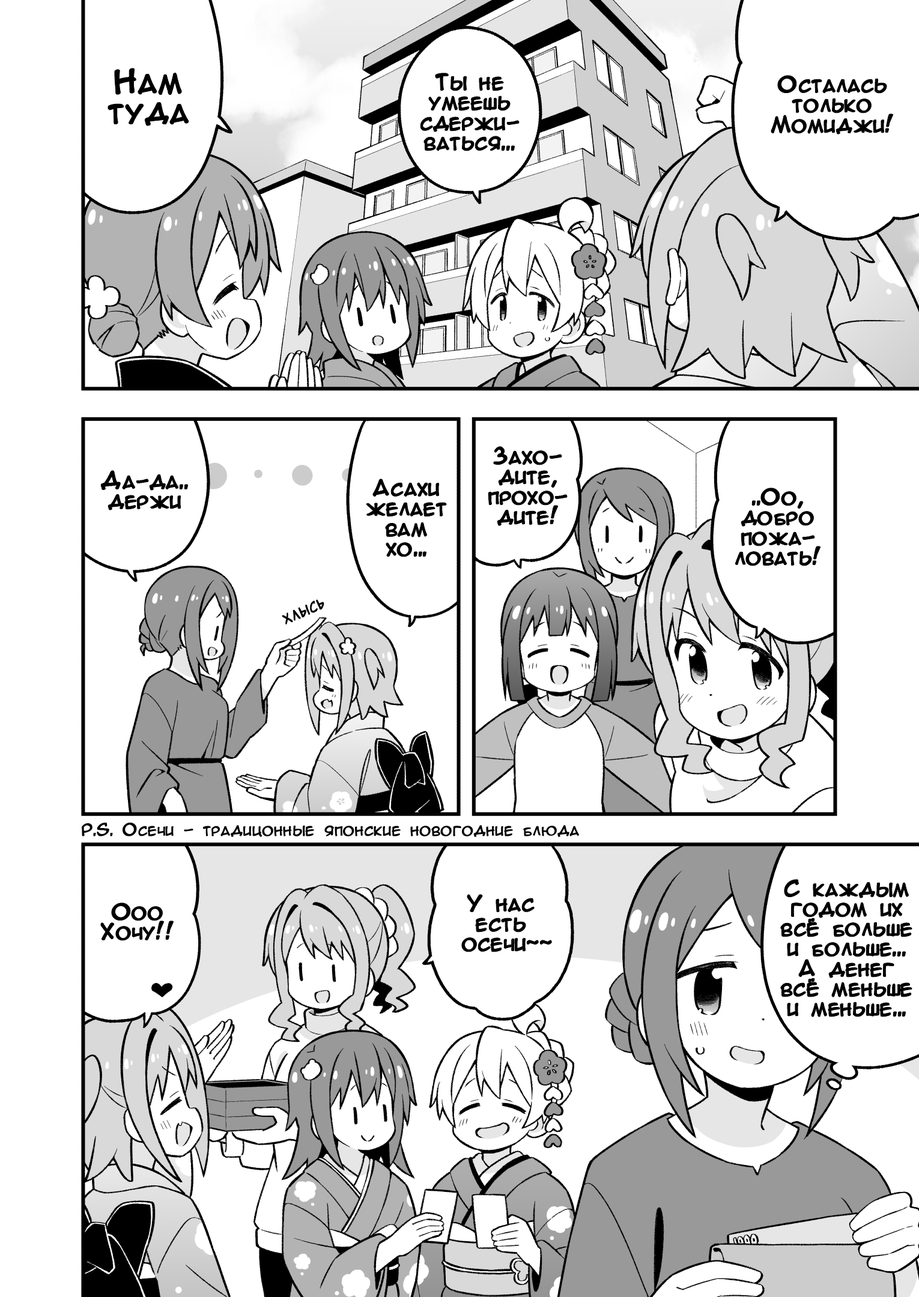
<style>
.page{position:relative;width:919px;height:1297px;background:#ffffff}
.page>*{position:absolute;margin:0}
.t1{font:30px/30px "AnimeAcev3";color:#000000;font-weight:bold}
.t2{font:20px/20px "AnimeAcev3";color:#000000;font-weight:bold}
.t3{font:15px "SuperWebcomicBros.Rusbyyakustick";color:#000000;font-weight:bold}
.t4{font:15px "AnimeAcev3";color:#000000;font-weight:bold}
</style>
<div class="page">
<p class="t1" style="left:108px;top:68px;width:81px;height:58px;text-align:center">Нам<br>туда</p>
<p class="t2" style="left:420px;top:73px;width:99px;height:78px;text-align:center">Ты не<br>умеешь<br>сдержи-<br>ваться...</p>
<p class="t2" style="left:771px;top:76px;width:122px;height:58px;text-align:center">Осталась<br>только<br>Момиджи!</p>
<p class="t2" style="left:488px;top:447px;width:79px;height:79px;text-align:center">Захо-<br>дите,<br>прохо-<br>дите!</p>
<p class="t2" style="left:101px;top:471px;width:87px;height:39px;text-align:center">Да-да..<br>держи</p>
<p class="t2" style="left:366px;top:479px;width:80px;height:78px;text-align:center">Асахи<br>желает<br>вам<br>хо...</p>
<p class="t2" style="left:735px;top:488px;width:86px;height:78px;text-align:center">..Оо,<br>добро<br>пожа-<br>ловать!</p>
<p class="t3" style="left:282px;top:599px;width:42px;height:26px;rotate:-24deg">Хлысь</p>
<p class="t4" style="left:82px;top:823px;width:497px;height:14px">P.S. Осечи - традицонные японские новогодние блюда</p>
<p class="t2" style="left:781px;top:880px;width:131px;height:137px;text-align:center">С каждым<br>годом их<br>всё больше<br>и больше...<br>А денег<br>всё меньше<br>и меньше...</p>
<p class="t2" style="left:101px;top:903px;width:73px;height:38px;text-align:center">Ооо<br>Хочу!!</p>
<p class="t2" style="left:462px;top:895px;width:90px;height:57px;text-align:center">У нас<br>есть<br> осечи~~</p>
</div>
